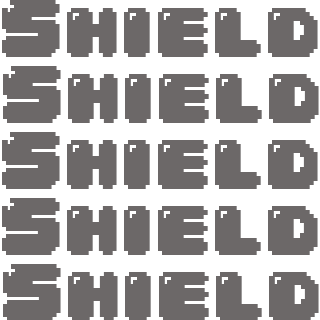
<style>
.page{position:relative;width:320px;height:320px;background:#6c6868}
.page>*{position:absolute;margin:0}
.t1{font:67.7px "04b30";letter-spacing:-0.005em;color:#6c6868;font-weight:bold}
</style>
<div class="page">
<p class="t1" style="left:2px;top:0px;width:316px;height:57px">Shield</p>
<p class="t1" style="left:3px;top:66px;width:316px;height:57px">Shield</p>
<p class="t1" style="left:2px;top:132px;width:316px;height:57px">Shield</p>
<p class="t1" style="left:2px;top:198px;width:316px;height:57px">Shield</p>
<p class="t1" style="left:3px;top:264px;width:316px;height:57px">Shield</p>
</div>
